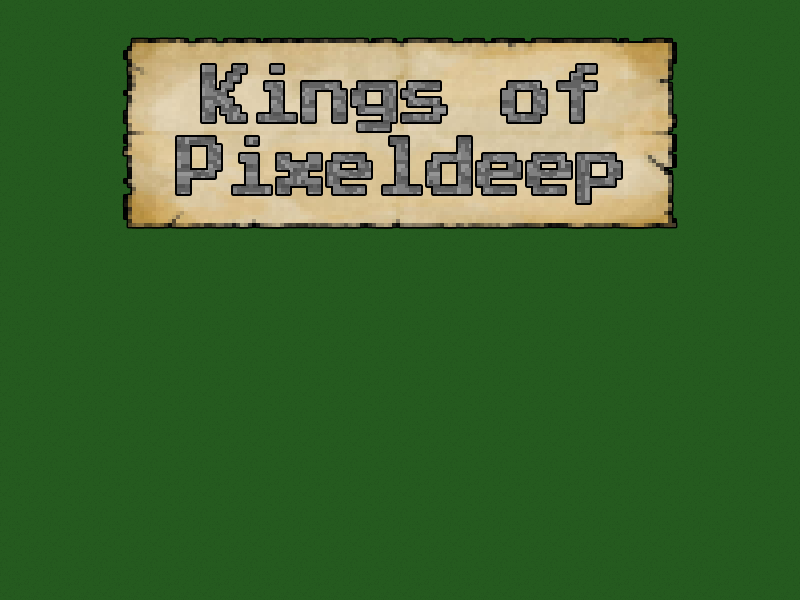
<style>
.page{position:relative;width:800px;height:600px;background:#255b1f}
.page>*{position:absolute;margin:0}
.t1{font:117.2px/72px "PressStart2P-Regular";scale:0.76 1}
</style>
<div class="page">
<p class="t1" style="left:177px;top:65px;width:444px;height:138px;text-align:center">Kings of<br>Pixeldeep</p>
</div>
